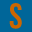
<style>
.page{position:relative;width:32px;height:32px;background:#006699}
.page>*{position:absolute;margin:0}
.t1{font:36px "BebasNeue";color:#cc6600}
</style>
<div class="page">
<p class="t1" style="left:9px;top:3px;width:13px;height:26px">S</p>
</div>
